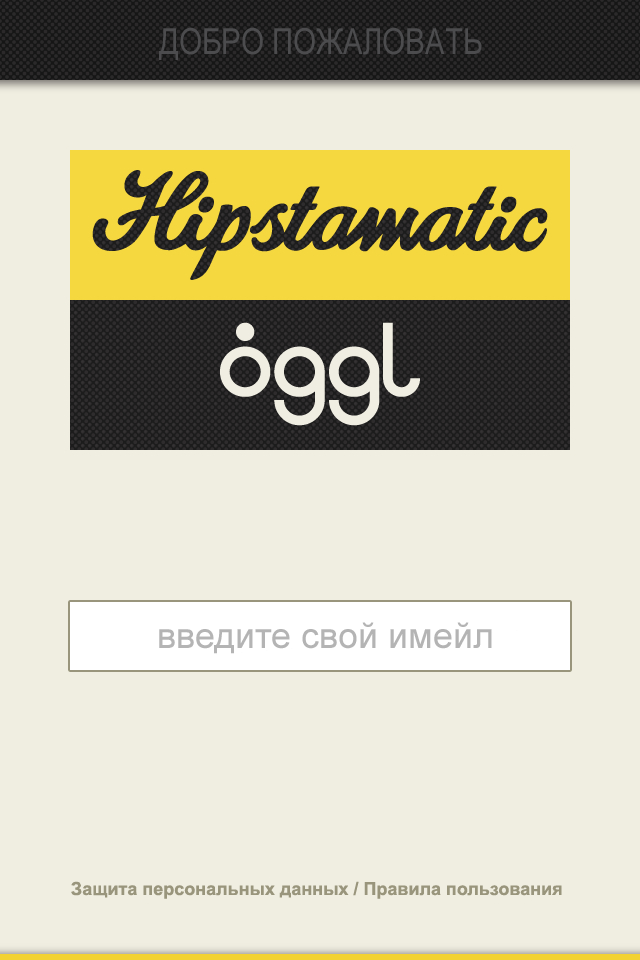
<style>
.page{position:relative;width:640px;height:960px;background:#f0eee1}
.page>*{position:absolute;margin:0}
.t1{font:36px "ArialNarrow";color:#4c4c4e}
.t2{font:36px "ArialMT";color:#b4b4b4}
.t3{font:18px "Arial-BoldMT";color:#99957c}
</style>
<div class="page">
<p class="t1" style="left:159px;top:27px;width:323px;height:33px">ДОБРО ПОЖАЛОВАТЬ</p>
<p class="t2" style="left:159px;top:622px;width:333px;height:32px">введите свой имейл</p>
<p class="t3" style="left:71px;top:881px;width:491px;height:18px">Защита персональных данных / Правила пользования</p>
</div>
